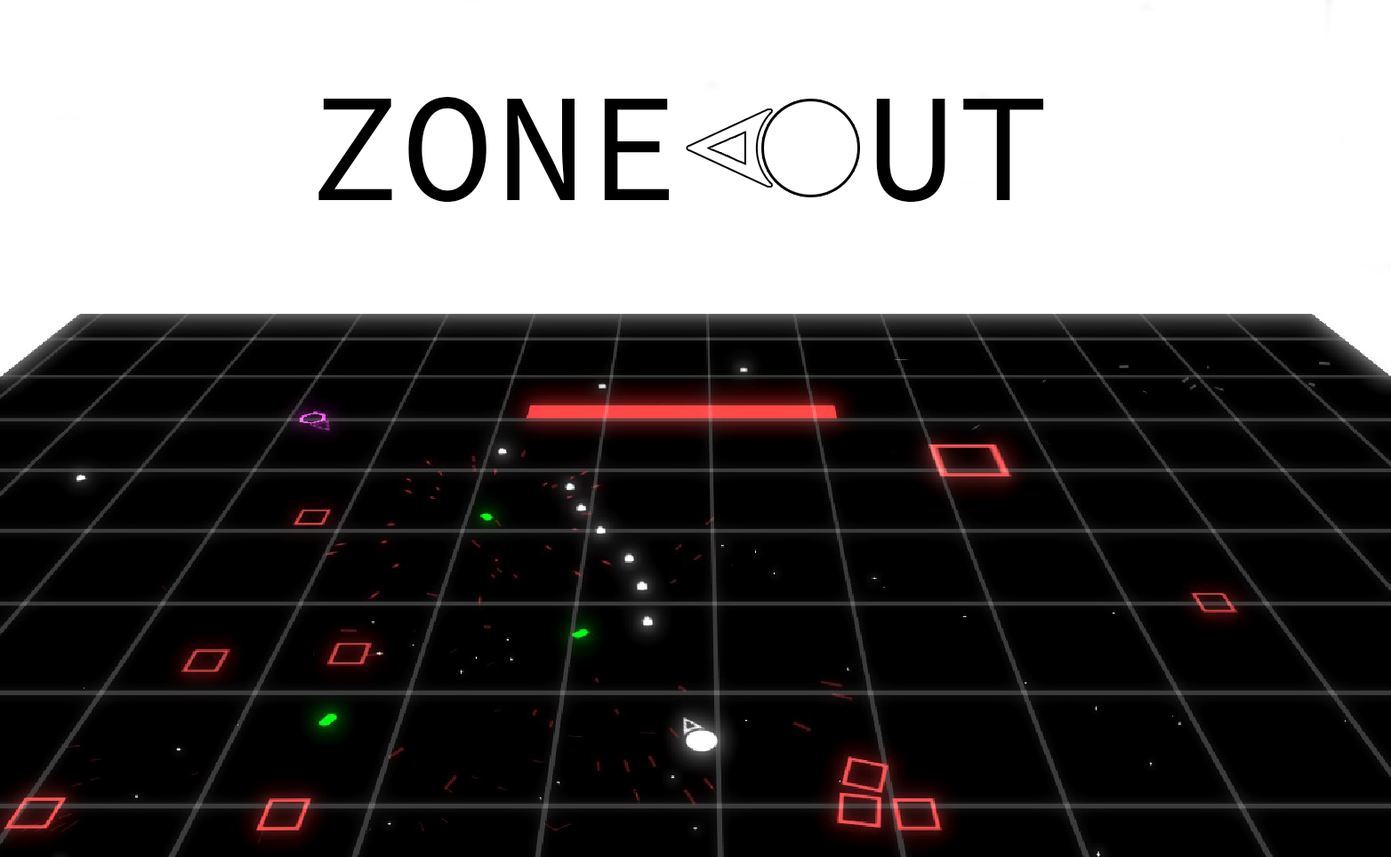
<style>
.page{position:relative;width:1391px;height:857px;background:#ffffff}
.page>*{position:absolute;margin:0}
.t1{font:154.4px "SourceCodeVariable-Roman";color:#000000}
</style>
<div class="page">
<p class="t1" style="left:318px;top:97px;width:726px;height:106px">ZONE  UT</p>
</div>
